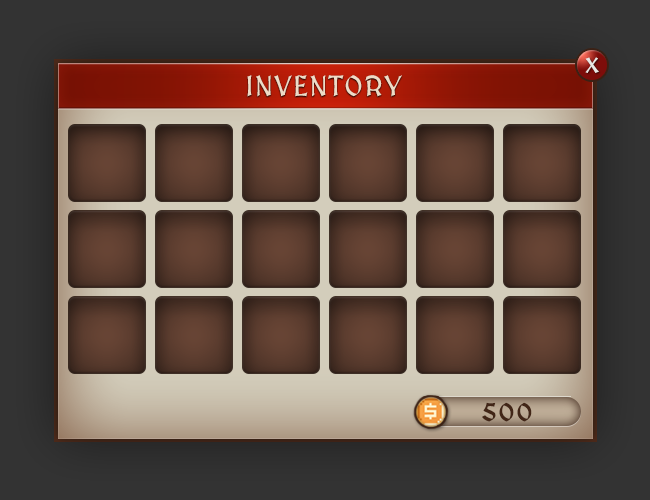
<style>
.page{position:relative;width:650px;height:500px}
.page>*{position:absolute;margin:0}
.t1{font:28px "MedievalSharp";letter-spacing:0.06em;color:#efdbc6;text-transform:uppercase}
.t2{font:24px "MedievalSharp";letter-spacing:0.06em;color:#422617;text-transform:uppercase;font-weight:bold}
</style>
<div class="page">
<p class="t1" style="left:247px;top:75px;width:155px;height:22px">inventory</p>
<p class="t2" style="left:482px;top:402px;width:50px;height:20px">500</p>
</div>
